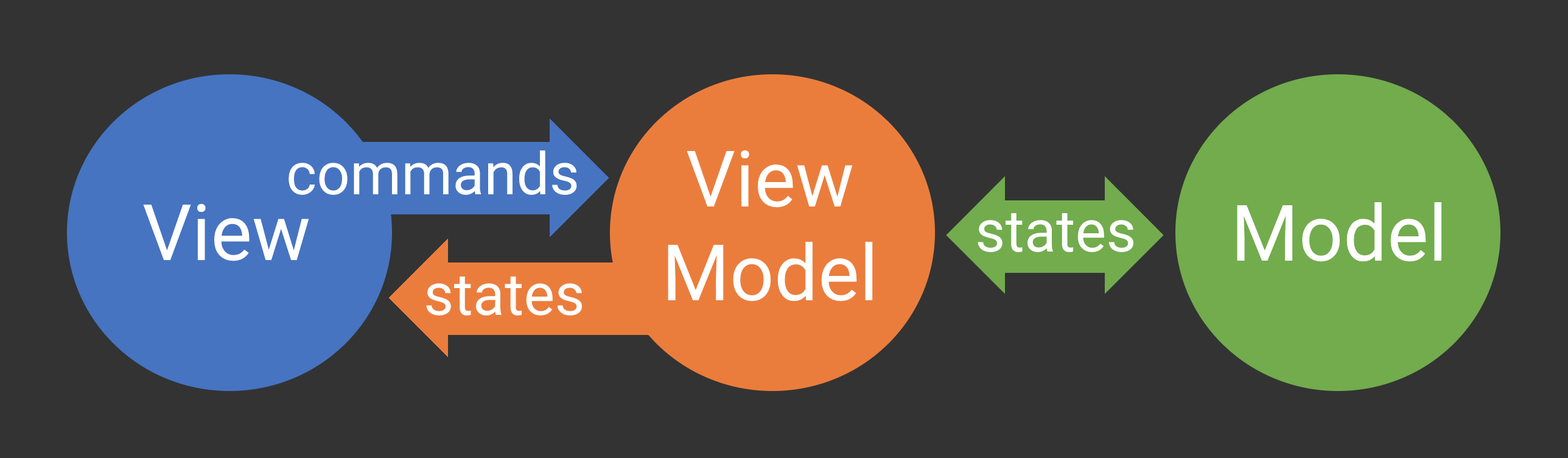
<style>
.page{position:relative;width:1568px;height:458px;background:#333333}
.page>*{position:absolute;margin:0}
.t1{font:77.9px "Roboto-Regular";color:#ffffff}
.t2{font:58.4px "Roboto-Regular";color:#ffffff}
</style>
<div class="page">
<p class="t1" style="left:668px;top:150px;width:205px;height:151px;text-align:center">View<br>Model</p>
<p class="t2" style="left:289px;top:150px;width:288px;height:45px">commands</p>
<p class="t1" style="left:143px;top:203px;width:166px;height:58px">View</p>
<p class="t1" style="left:1237px;top:202px;width:205px;height:60px">Model</p>
<p class="t2" style="left:978px;top:213px;width:156px;height:39px">states</p>
<p class="t2" style="left:426px;top:276px;width:157px;height:39px">states</p>
</div>
